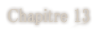
<style>
.page{position:relative;width:104px;height:31px;background:#ffffff}
.page>*{position:absolute;margin:0}
.t1{font:19px "MS-PMincho";color:#d6cdc1;font-weight:bold;scale:0.84 1}
</style>
<div class="page">
<p class="t1" style="left:8px;top:8px;width:82px;height:17px">Chapitre 13</p>
</div>
